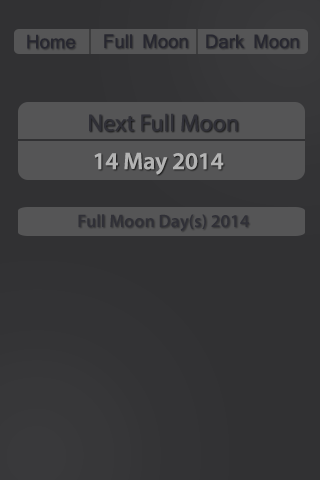
<style>
.page{position:relative;width:320px;height:480px;background:#313133}
.page>*{position:absolute;margin:0}
.t1{font:18px "Mangal";color:#272730}
.t2{font:24px "MyriadPro-Regular";color:#303037}
.t3{font:24px "MyriadPro-Semibold";color:#b3b3b3}
.t4{font:18px "MyriadPro-Semibold";color:#303037}
</style>
<div class="page">
<p class="t1" style="left:27px;top:34px;width:49px;height:15px">Home</p>
<p class="t1" style="left:104px;top:34px;width:84px;height:15px">Full Moon</p>
<p class="t1" style="left:206px;top:34px;width:93px;height:15px">Dark Moon</p>
<p class="t2" style="left:89px;top:113px;width:149px;height:19px">Next Full Moon</p>
<p class="t3" style="left:94px;top:152px;width:130px;height:23px">14 May 2014</p>
<p class="t4" style="left:78px;top:214px;width:171px;height:17px">Full Moon Day(s) 2014</p>
</div>
